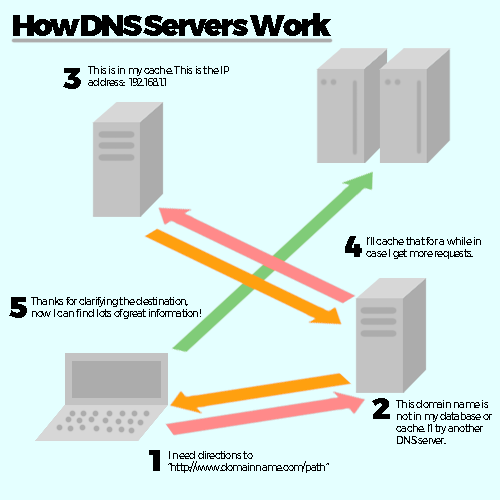
<style>
.page{position:relative;width:500px;height:500px;background:#e4ffff}
.page>*{position:absolute;margin:0}
.t1{font:30px "Montserrat-Black";letter-spacing:-0.075em;color:#000000}
.t2{font:10px "Montserrat-Regular";letter-spacing:-0.075em;color:#000000}
</style>
<div class="page">
<p class="t1" style="left:13px;top:13px;width:318px;height:23px">How DNS Servers Work</p>
<p class="t1" style="left:63px;top:68px;width:18px;height:21px">3</p>
<p class="t2" style="left:88px;top:66px;width:141px;height:20px">This is in my cache. This is the IP address:  192.168.1.1</p>
<p class="t1" style="left:345px;top:236px;width:17px;height:21px">4</p>
<p class="t2" style="left:366px;top:237px;width:115px;height:22px">I’ll cache that for a while in case I get more requests.</p>
<p class="t1" style="left:9px;top:297px;width:18px;height:21px">5</p>
<p class="t2" style="left:31px;top:297px;width:170px;height:22px">Thanks for clarifying the destination, now I can find lots of great information!</p>
<p class="t1" style="left:372px;top:398px;width:18px;height:21px">2</p>
<p class="t2" style="left:396px;top:400px;width:96px;height:44px">This domain name is not in my database or cache. I’l try another DNS server.</p>
<p class="t1" style="left:149px;top:450px;width:11px;height:21px">1</p>
<p class="t2" style="left:168px;top:451px;width:161px;height:22px">I need directions to “http://www.domainname.com/path”</p>
</div>
